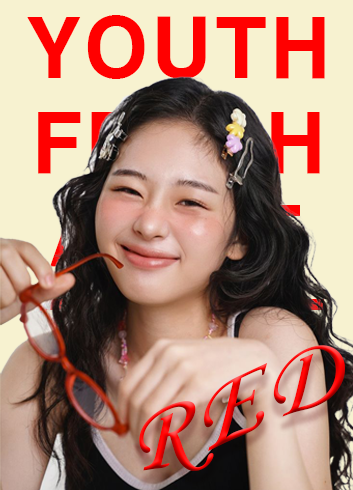
<style>
.page{position:relative;width:353px;height:490px;background:#f7f2d0}
.page>*{position:absolute;margin:0}
.t1{font:79.7px "H2gtrE";color:#ff0000}
.t2{font:79.7px "H2gtrE"}
.t3{font:104.2px "MonotypeCorsiva";letter-spacing:0.05em}
</style>
<div class="page">
<p class="t1" style="left:27px;top:15px;width:298px;height:64px">YOUTH</p>
<p class="t2" style="left:38px;top:110px;width:282px;height:65px">FRESH</p>
<p class="t3" style="left:139px;top:345px;width:206px;height:126px">RED</p>
</div>
